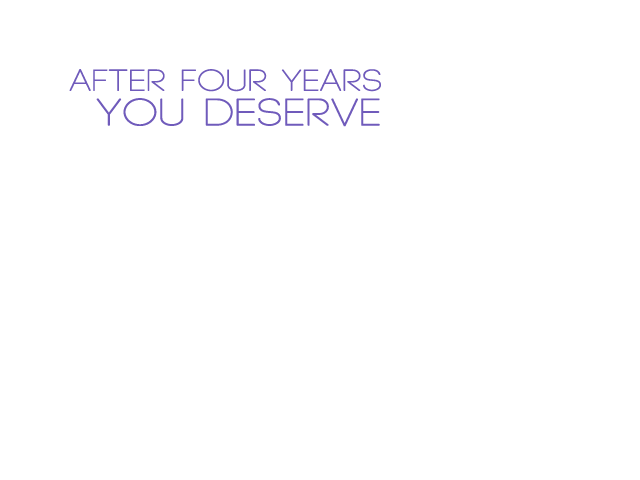
<style>
.page{position:relative;width:640px;height:480px;background:#ffffff}
.page>*{position:absolute;margin:0}
.t1{font:29.3px "Code-Light";letter-spacing:0.02em;color:#705bbb;font-weight:bold;scale:1.19 1}
.t2{font:37.1px "Code-Light";letter-spacing:0.02em;color:#705bbb;font-weight:bold;scale:1.19 1}
</style>
<div class="page">
<p class="t1" style="left:69px;top:69px;width:312px;height:23px">After Four years</p>
<p class="t2" style="left:96px;top:98px;width:284px;height:29px">you deserve</p>
</div>
